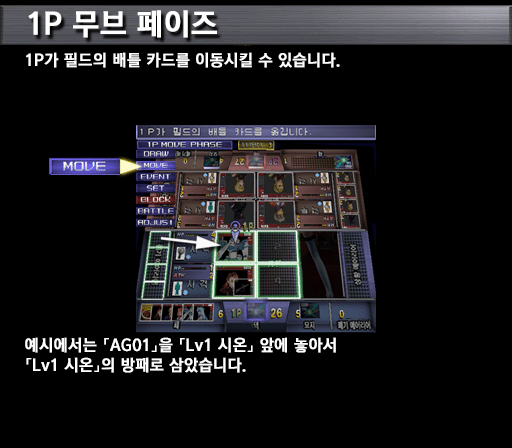
<style>
.page{position:relative;width:512px;height:448px;background:#000000}
.page>*{position:absolute;margin:0}
.t1{font:30px "KoreanGD15-R";color:#ffffff;font-weight:bold}
.t2{font:16px "KoreanGD15-R";color:#ffffff;font-weight:bold}
.t3{font:16px/20px "KoreanGD15-R";color:#ffffff;font-weight:bold}
</style>
<div class="page">
<p class="t1" style="left:28px;top:10px;width:189px;height:28px">1P 무브 페이즈</p>
<p class="t2" style="left:26px;top:52px;width:314px;height:16px">1P가 필드의 배틀 카드를 이동시킬 수 있습니다.</p>
<p class="t3" style="left:25px;top:337px;width:311px;height:36px">예시에서는 「AG01」을 「Lv1 시온」 앞에 놓아서<br>「Lv1 시온」의 방패로 삼았습니다.</p>
</div>
